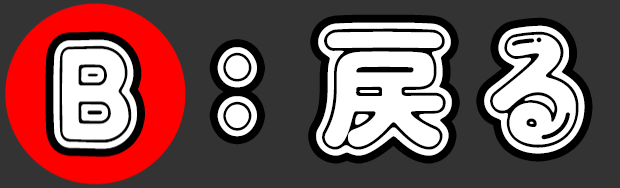
<style>
.page{position:relative;width:620px;height:188px;background:#333333}
.page>*{position:absolute;margin:0}
.t1{font:150px "DokiDokiFantasia";color:#ffffff}
</style>
<div class="page">
<p class="t1" style="left:217px;top:22px;width:368px;height:134px">：戻る</p>
</div>
